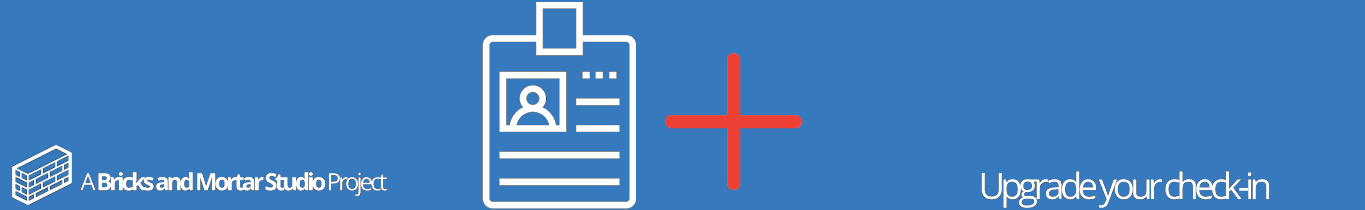
<style>
.page{position:relative;width:1365px;height:210px;background:#367abd}
.page>*{position:absolute;margin:0}
.t1{font:23.8px "OpenSans-Bold";letter-spacing:-0.12em;color:#ffffff}
.t2{font:23.8px "OpenSans";letter-spacing:-0.12em;color:#ffffff}
.t3{font:36.2px "OpenSans";letter-spacing:-0.12em;color:#ffffff}
</style>
<div class="page">
<p class="t1" style="left:80px;top:172px;width:307px;height:24px"><span class="t2">A </span>Bricks and Mortar Studio <span class="t2">Project</span></p>
<p class="t3" style="left:981px;top:171px;width:288px;height:37px">Upgrade your check-in</p>
</div>
